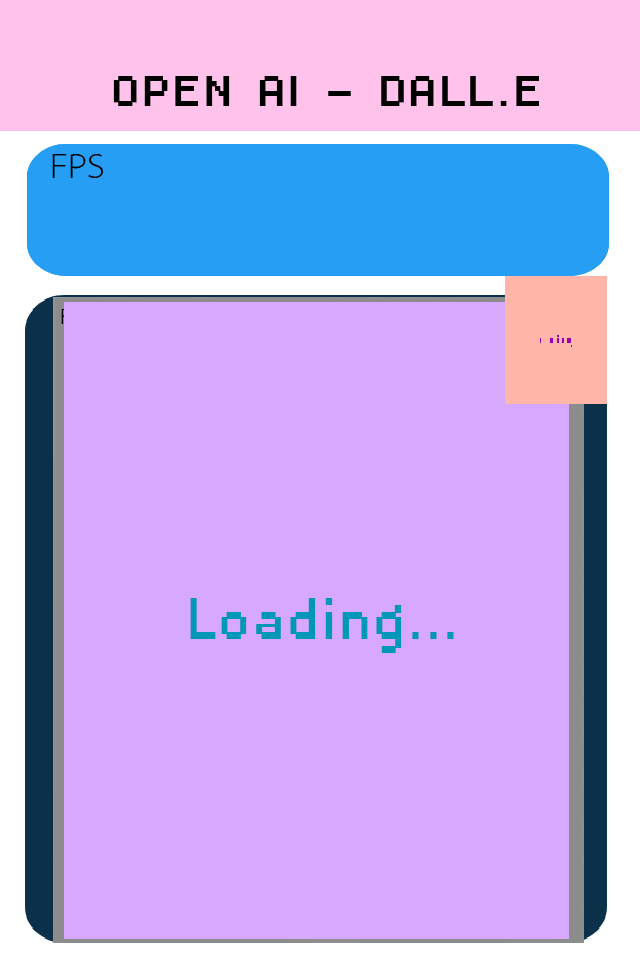
<style>
.page{position:relative;width:640px;height:960px;background:#d6a8ff}
.page>*{position:absolute;margin:0}
.t1{font:55.8px "DisposableDroidBB";color:#000000;scale:1.14 1}
.t2{font:50.2px "THSarabunPSK";color:#000000}
.t3{font:31.9px "THSarabunPSK";color:#d6a8ff}
</style>
<div class="page">
<p class="t1" style="left:113px;top:76px;width:426px;height:30px">OPEN AI - DALL.E</p>
<p class="t2" style="left:52px;top:154px;width:52px;height:24px">FPS</p>
<p class="t3" style="left:61px;top:308px;width:33px;height:16px">FPS</p>
</div>
